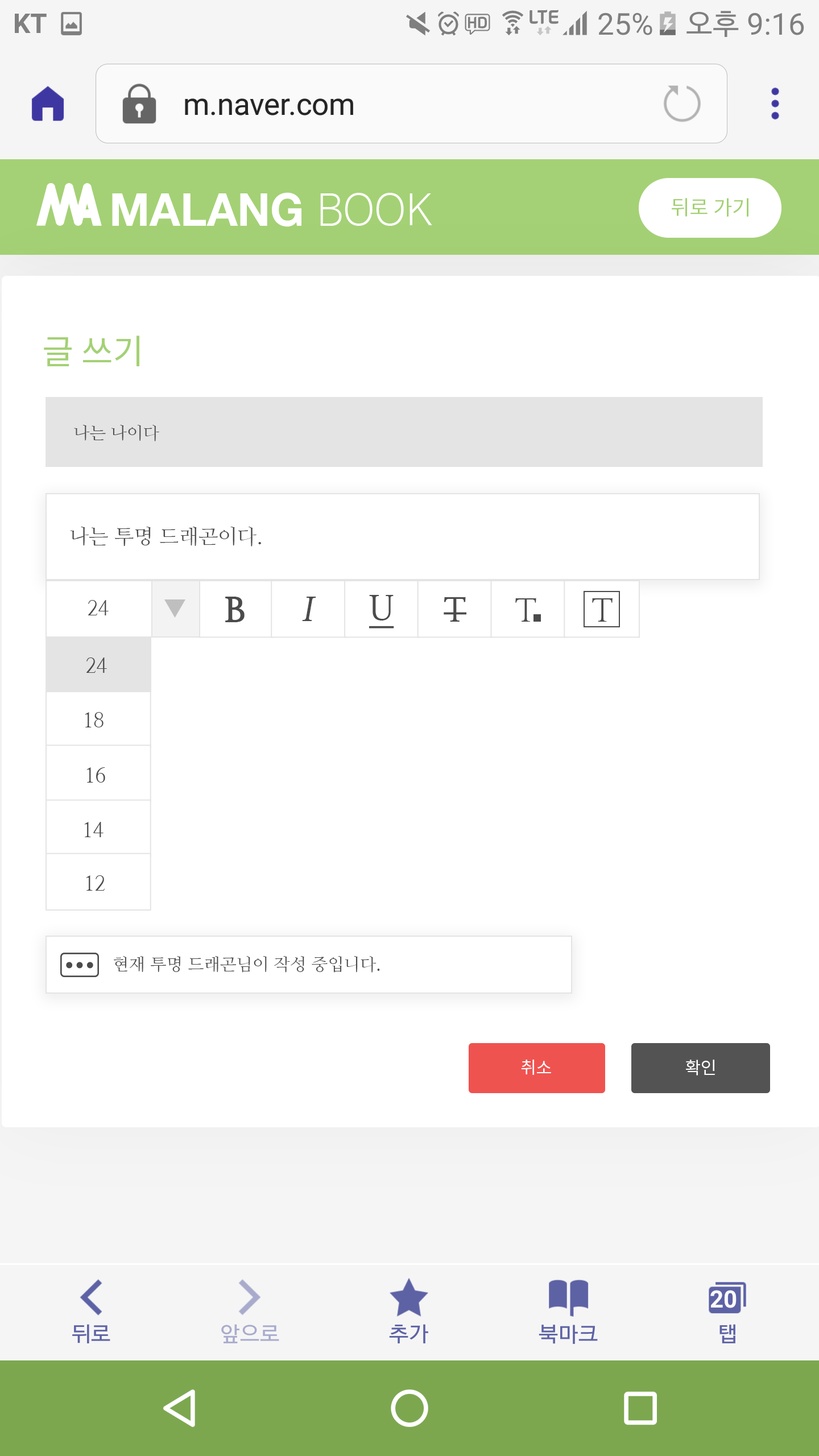
<style>
.page{position:relative;width:819px;height:1456px;background:#ffffff}
.page>*{position:absolute;margin:0}
.t1{font:20.5px "NotoSansCJKkr-Regular";color:#a4d175}
.t2{font:34.1px "NotoSansCJKkr-Regular";color:#a4d175}
.t3{font:17.1px "NanumMyeongjo";color:#4b4b4b}
.t4{font:20.5px "NanumMyeongjo";color:#4b4b4b}
.t5{font:33.7px "NanumMyeongjoBold";color:#4b4b4b;font-weight:bold}
.t6{font:33.7px "NanumMyeongjoBold";color:#4b4b4b;font-style:italic}
.t7{font:33.7px "NanumMyeongjoBold";color:#4b4b4b;text-decoration:underline}
.t8{font:33.7px "NanumMyeongjoBold";color:#4b4b4b}
.t9{font:17.1px "NotoSansCJKkr-Regular";color:#ffffff}
</style>
<div class="page">
<p class="t1" style="left:672px;top:198px;width:76px;height:19px">뒤로 가기</p>
<p class="t2" style="left:44px;top:336px;width:95px;height:30px">글 쓰기</p>
<p class="t3" style="left:74px;top:425px;width:85px;height:16px">나는 나이다</p>
<p class="t4" style="left:70px;top:527px;width:191px;height:20px">나는 투명 드래곤이다.</p>
<p class="t4" style="left:88px;top:600px;width:21px;height:15px">24</p>
<p class="t5" style="left:225px;top:597px;width:20px;height:25px">B</p>
<p class="t6" style="left:302px;top:597px;width:14px;height:24px">I</p>
<p class="t7" style="left:369px;top:595px;width:25px;height:33px">U</p>
<p class="t8" style="left:444px;top:597px;width:23px;height:25px">T</p>
<p class="t4" style="left:86px;top:657px;width:21px;height:16px">24</p>
<p class="t4" style="left:85px;top:712px;width:19px;height:15px">18</p>
<p class="t4" style="left:86px;top:767px;width:19px;height:16px">16</p>
<p class="t4" style="left:84px;top:822px;width:20px;height:15px">14</p>
<p class="t4" style="left:86px;top:875px;width:19px;height:16px">12</p>
<p class="t3" style="left:114px;top:956px;width:266px;height:17px">현재 투명 드래곤님이 작성 중입니다.</p>
<p class="t9" style="left:521px;top:1060px;width:30px;height:15px">취소</p>
<p class="t9" style="left:686px;top:1060px;width:29px;height:15px">확인</p>
</div>
